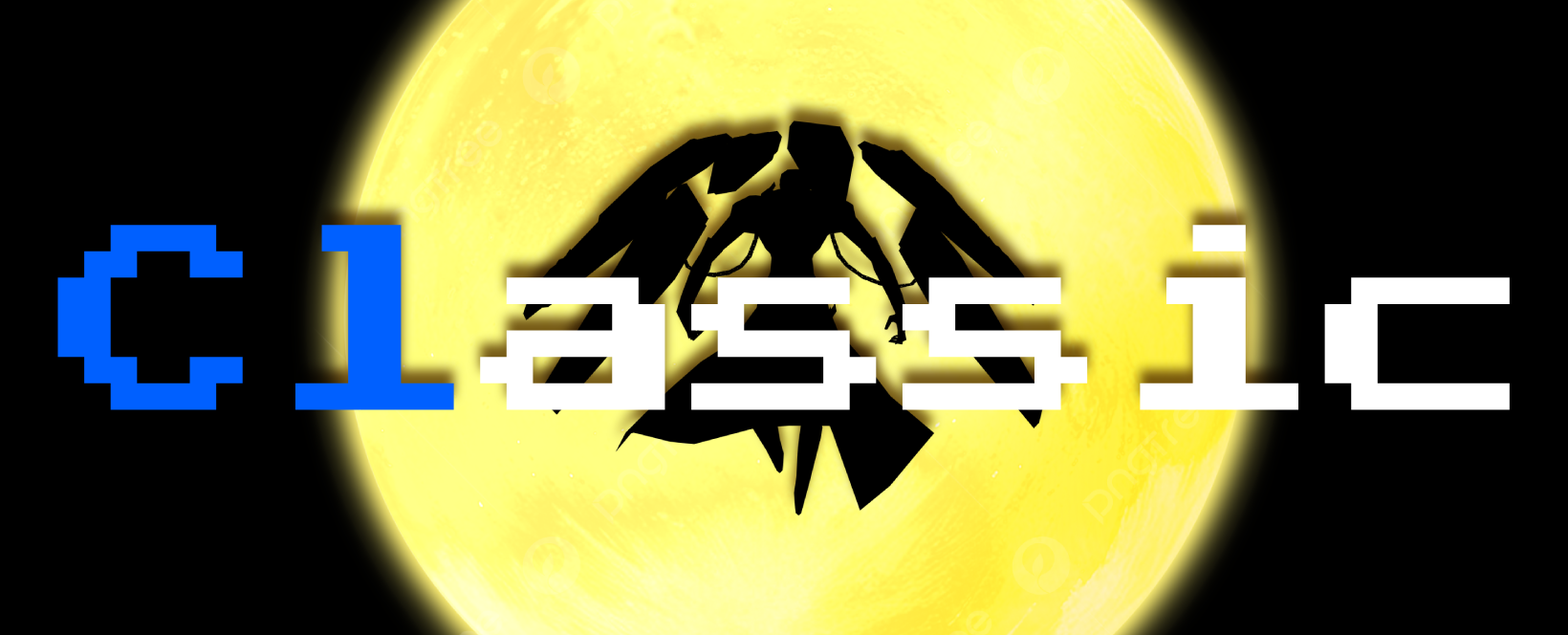
<style>
.page{position:relative;width:1568px;height:635px;background:#000000}
.page>*{position:absolute;margin:0}
.t1{font:211.2px "PressStart2P-Regular";color:#ffffff}
.t2{font:211.2px "PressStart2P-Regular";color:#0060ff}
</style>
<div class="page">
<p class="t1" style="left:57px;top:225px;width:1453px;height:185px"><span class="t2">Cl</span>assic</p>
</div>
